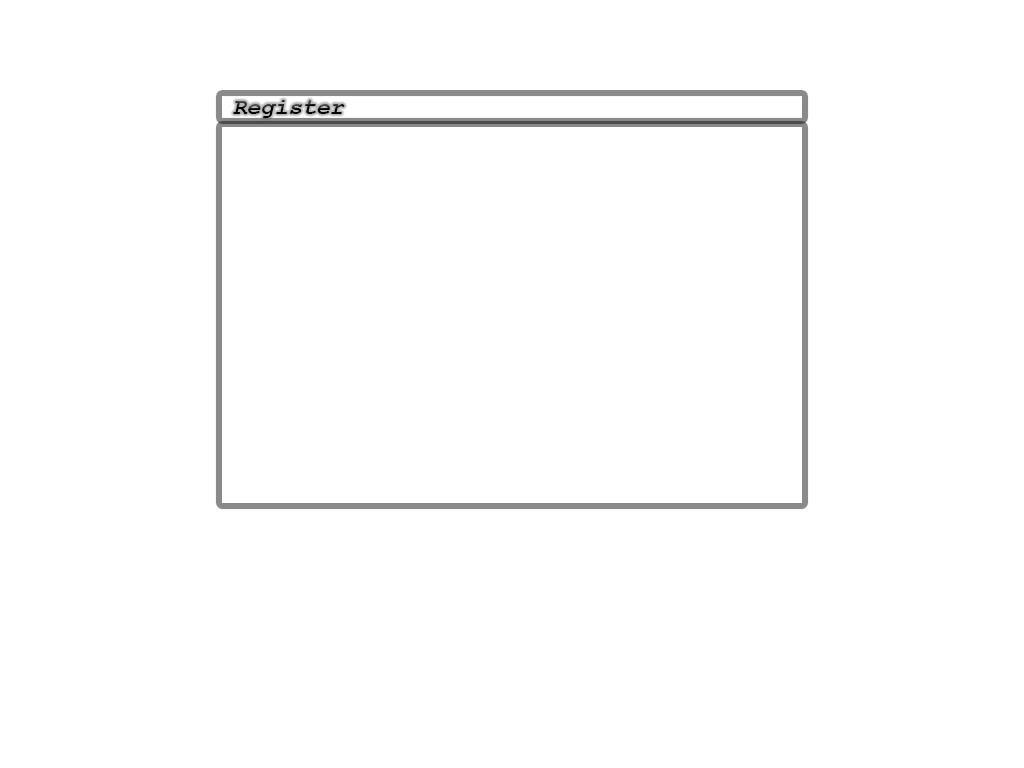
<style>
.page{position:relative;width:1024px;height:768px;background:#ffffff}
.page>*{position:absolute;margin:0}
.t1{font:23.1px "CourierNewPS-BoldItalicMT";color:#000000}
</style>
<div class="page">
<p class="t1" style="left:233px;top:100px;width:112px;height:18px">Register</p>
</div>
